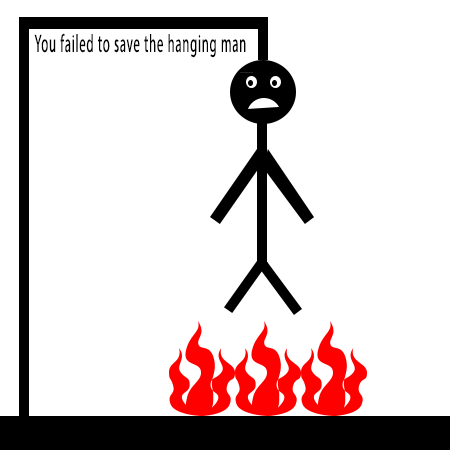
<style>
.page{position:relative;width:450px;height:450px;background:#ffffff}
.page>*{position:absolute;margin:0}
.t1{font:25px "MyriadPro-Regular";letter-spacing:0.065em;color:#000000;scale:0.51 1}
</style>
<div class="page">
<p class="t1" style="left:34px;top:33px;width:212px;height:25px">You failed to save the hanging man</p>
</div>
